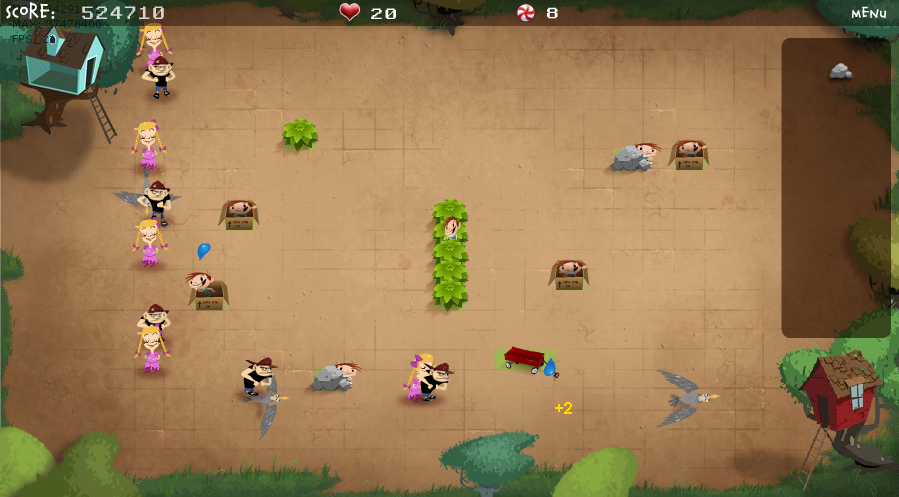
<style>
.page{position:relative;width:899px;height:497px}
.page>*{position:absolute;margin:0}
.t1{font:17.9px "CalvinAndHobbesNormal";letter-spacing:0.07em;color:#ffffff;font-weight:bold}
.t2{font:17.9px "BerlinSansFB-Reg";letter-spacing:0.07em;color:#ffffff;font-weight:bold}
.t3{font:20px "WST_Engl";letter-spacing:0.07em;color:#d2d4d0;scale:0.83 1}
.t4{font:13.4px "CalvinAndHobbesNormal";letter-spacing:0.07em;color:#ffffff;font-weight:bold}
.t5{font:16.7px "WST_Engl";letter-spacing:0.07em;color:#ffffff}
</style>
<div class="page">
<p class="t1" style="left:6px;top:2px;width:49px;height:17px">SCORE<span class="t2">:</span></p>
<p class="t3" style="left:82px;top:6px;width:82px;height:13px">524710</p>
<p class="t4" style="left:851px;top:6px;width:35px;height:12px">MENU</p>
<p class="t5" style="left:371px;top:8px;width:25px;height:11px">20</p>
<p class="t5" style="left:547px;top:7px;width:11px;height:12px">8</p>
</div>
